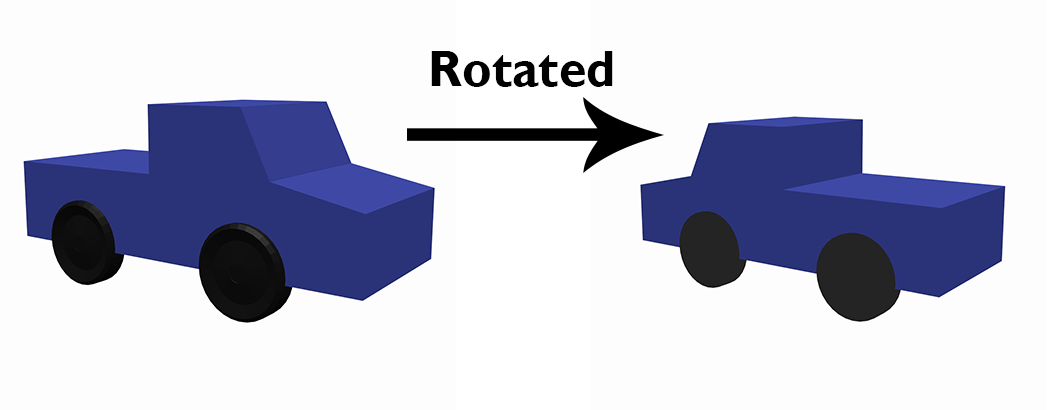
<style>
.page{position:relative;width:1050px;height:410px;background:#fdfdfd}
.page>*{position:absolute;margin:0}
.t1{font:50px "GillSansMT-Bold";color:#000000}
</style>
<div class="page">
<p class="t1" style="left:431px;top:51px;width:182px;height:36px">Rotated</p>
</div>
